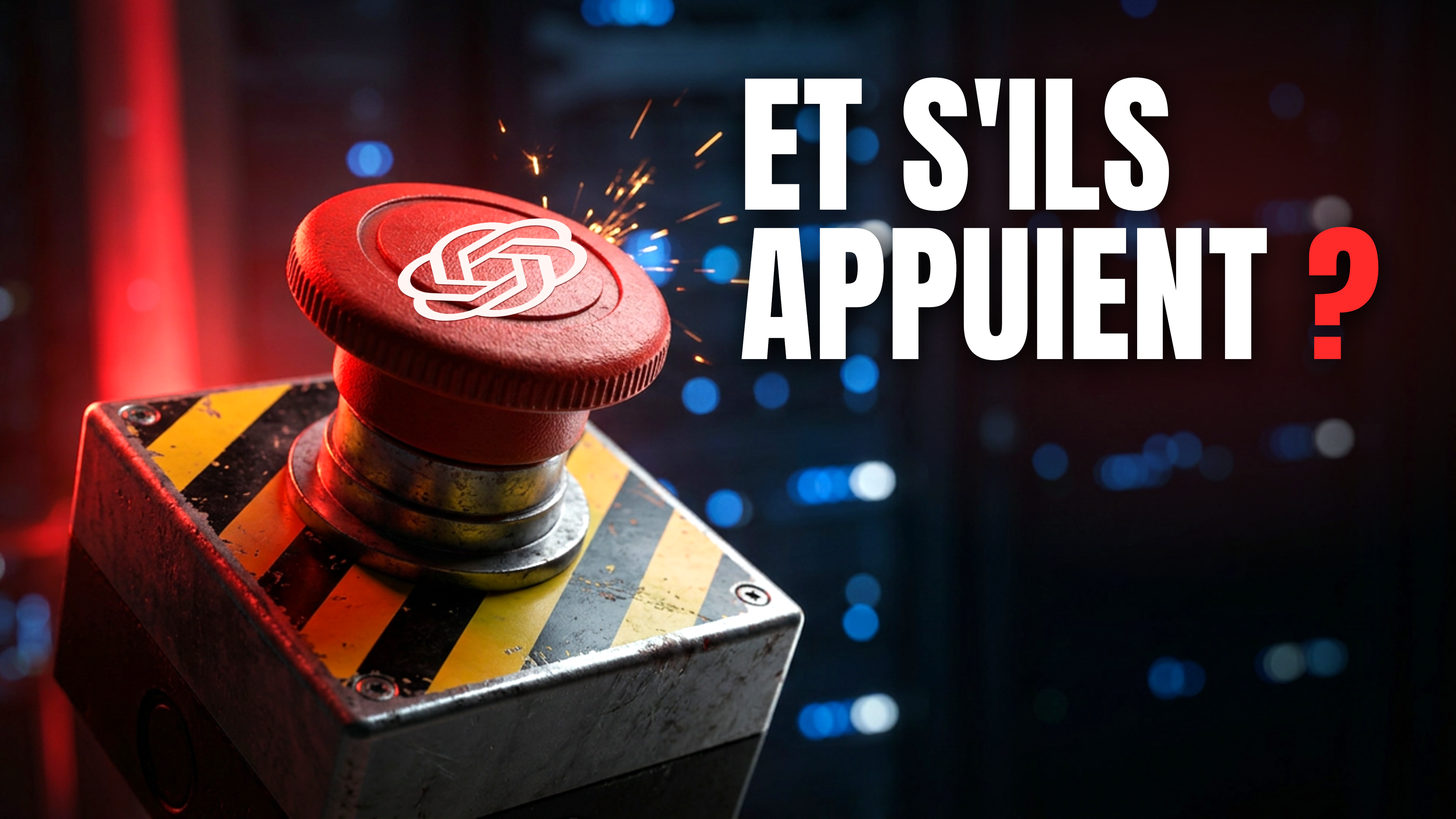
<style>
.page{position:relative;width:1456px;height:819px}
.page>*{position:absolute;margin:0}
.t1{font:152.4px/149.4px "Anton-Regular";letter-spacing:0.005em;color:#ffffff}
.t2{font:152.4px/149.4px "Anton-Regular";letter-spacing:0.005em;color:#ff2a2a}
</style>
<div class="page">
<p class="t1" style="left:741px;top:77px;width:638px;height:284px">ET S'ILS<br>APPUIENT <span class="t2">?</span></p>
</div>
